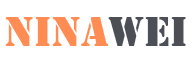
<style>
.page{position:relative;width:192px;height:60px;background:#ffffff}
.page>*{position:absolute;margin:0}
.t1{font:44px "Stencil";color:#ff8c53}
.t2{font:44px "Stencil";color:#4c4f55}
</style>
<div class="page">
<p class="t1" style="left:5px;top:17px;width:181px;height:29px">NINA<span class="t2">WEI</span></p>
</div>
